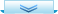
<style>
.page{position:relative;width:58px;height:14px}
.page>*{position:absolute;margin:0}
.t1{font:18px "MicrosoftYaHei"}
</style>
<div class="page">
<p class="t1" style="left:20px;top:4px;width:18px;height:9px;rotate:90deg">》</p>
</div>
